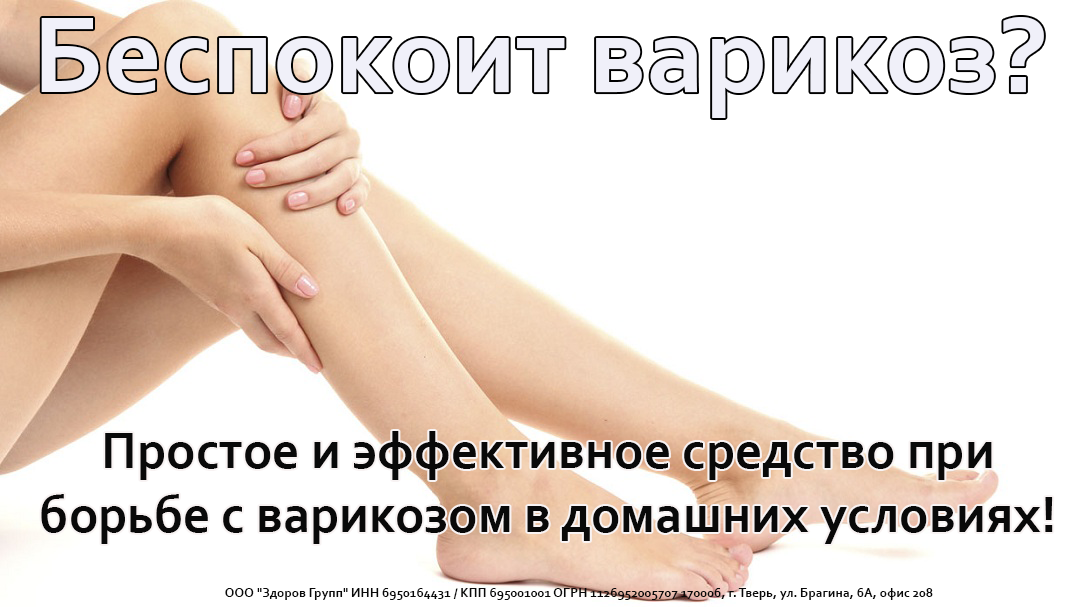
<style>
.page{position:relative;width:1080px;height:607px;background:#ffffff}
.page>*{position:absolute;margin:0}
.t1{font:53.3px "Corbel-Bold";color:#090909}
.t2{font:13.3px "Corbel-Bold";color:#090909}
</style>
<div class="page">
<p class="t1" style="left:41px;top:431px;width:1012px;height:113px;text-align:center">Простое и эффективное средство при борьбе с варикозом в домашних условиях!</p>
<p class="t2" style="left:225px;top:588px;width:708px;height:12px">ООО "Здоров Групп" ИНН 6950164431 / КПП 695001001 ОГРН 1126952005707 170006, г. Тверь, ул. Брагина, 6А, офис 208</p>
</div>
